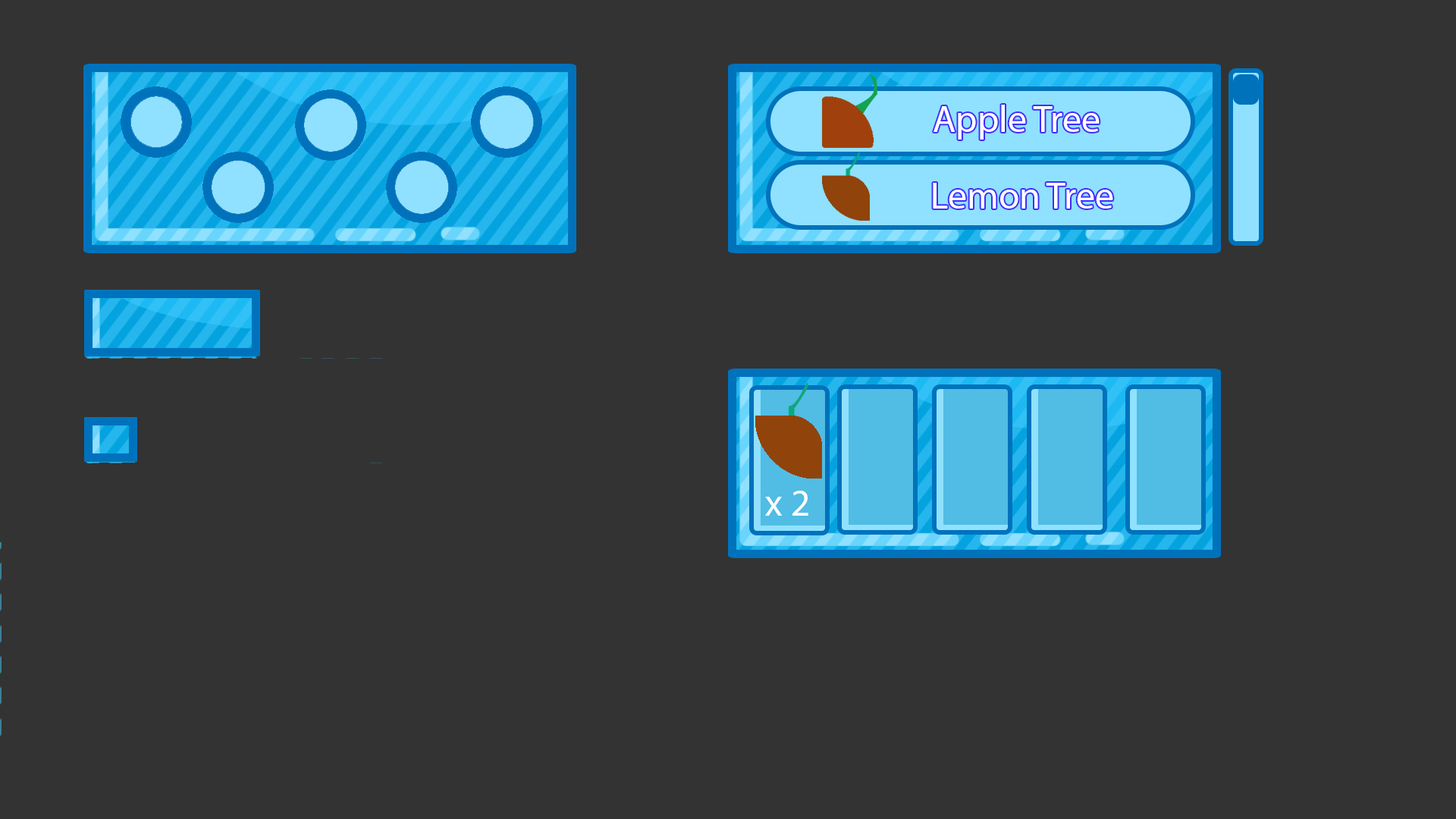
<style>
.page{position:relative;width:1456px;height:819px;background:#333333}
.page>*{position:absolute;margin:0}
.t1{font:9.1px "MyriadPro-Regular";color:#ffffff}
</style>
<div class="page">
<p class="t1" style="left:933px;top:105px;width:167px;height:35px">Apple Tree</p>
<p class="t1" style="left:933px;top:183px;width:180px;height:26px">Lemon Tree</p>
<p class="t1" style="left:765px;top:491px;width:43px;height:25px">x 2</p>
</div>
